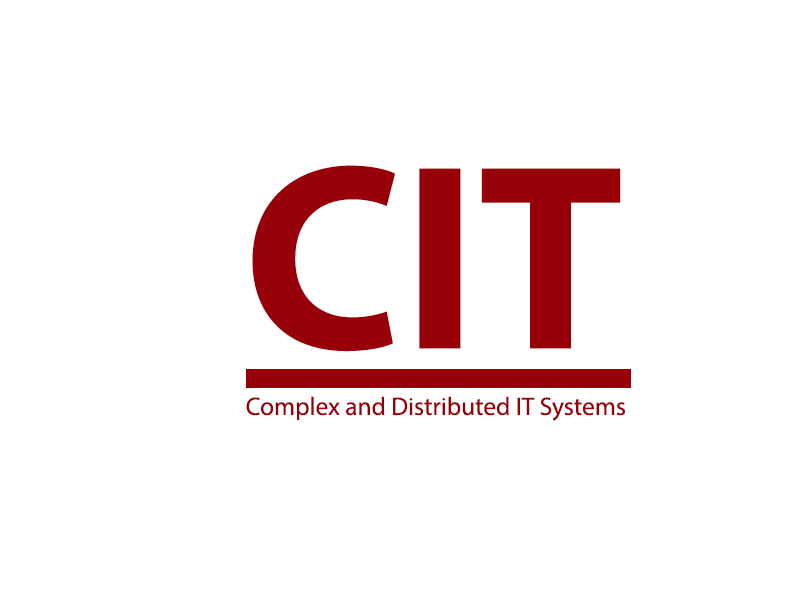
<style>
.page{position:relative;width:800px;height:600px;background:#ffffff}
.page>*{position:absolute;margin:0}
.t1{font:266.7px "MyriadPro-Bold";color:#970009}
.t2{font:25.3px "MyriadPro-Regular";color:#970009}
</style>
<div class="page">
<p class="t1" style="left:252px;top:165px;width:369px;height:187px">CIT</p>
<p class="t2" style="left:246px;top:396px;width:379px;height:25px">Complex and Distributed IT Systems</p>
</div>
